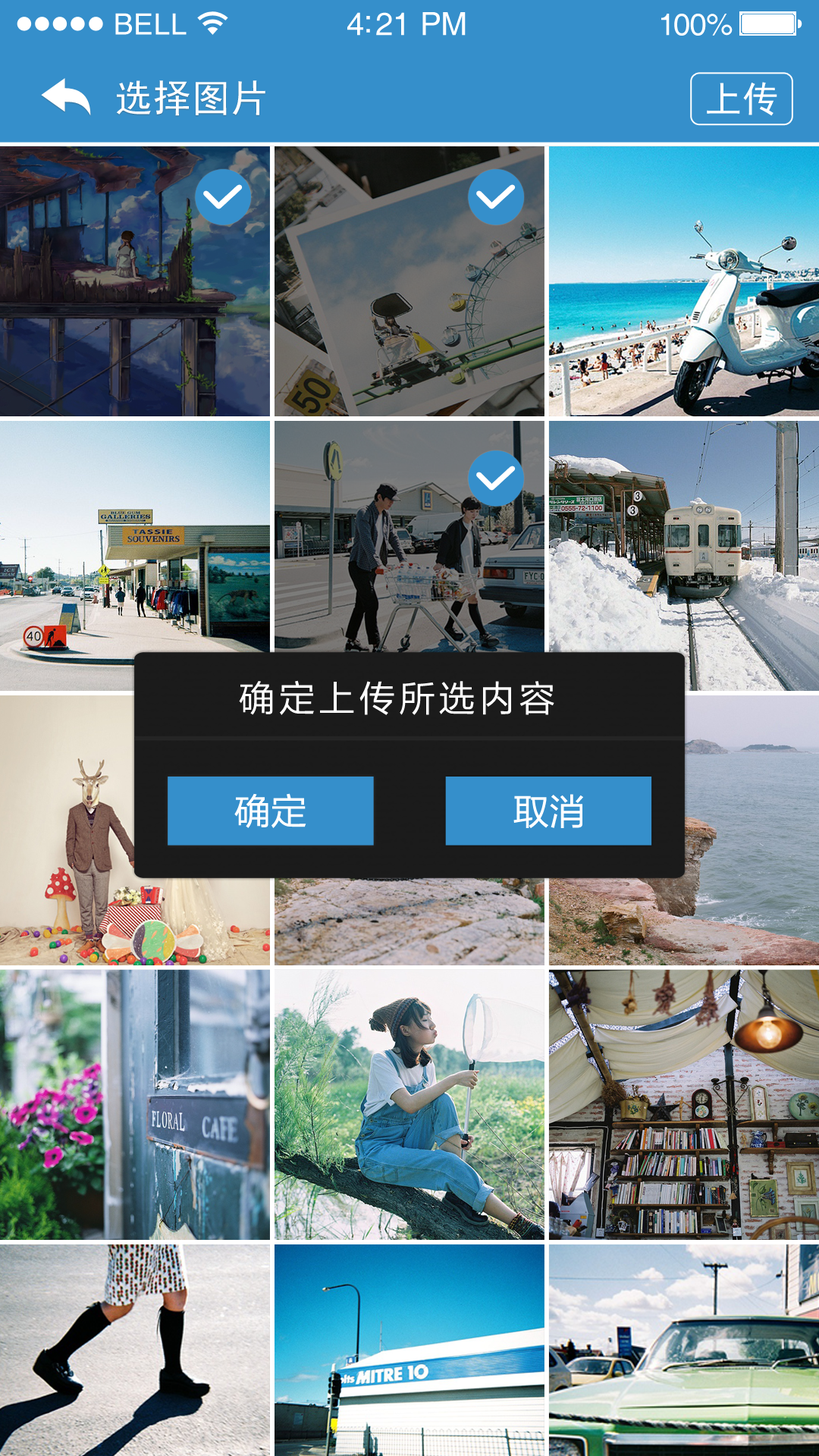
<style>
.page{position:relative;width:819px;height:1456px}
.page>*{position:absolute;margin:0}
.t1{font:29.3px "Helvetica";letter-spacing:0.02em;color:#ffffff}
.t2{font:31.8px "Helvetica";letter-spacing:-0.02em;color:#ffffff}
.t3{font:30.6px "Helvetica";letter-spacing:-0.02em;color:#ffffff}
.t4{font:37.9px "SimHei";letter-spacing:0.025em;color:#ffffff}
.t5{font:36.4px "SimHei";letter-spacing:0.025em;color:#ffffff}
.t6{font:36.4px "FZLTHJW--GB1-0";letter-spacing:0.1em;color:#fefefe}
.t7{font:36.4px "FZLTHJW--GB1-0";color:#ffffff}
</style>
<div class="page">
<p class="t1" style="left:115px;top:13px;width:72px;height:22px">BELL</p>
<p class="t2" style="left:347px;top:12px;width:119px;height:24px">4:21 PM</p>
<p class="t3" style="left:661px;top:14px;width:72px;height:22px">100%</p>
<p class="t4" style="left:116px;top:80px;width:149px;height:36px">选择图片</p>
<p class="t5" style="left:707px;top:82px;width:70px;height:34px">上传</p>
<p class="t6" style="left:239px;top:680px;width:315px;height:35px">确定上传所选内容</p>
<p class="t7" style="left:234px;top:793px;width:72px;height:35px">确定</p>
<p class="t7" style="left:513px;top:794px;width:70px;height:34px">取消</p>
</div>
